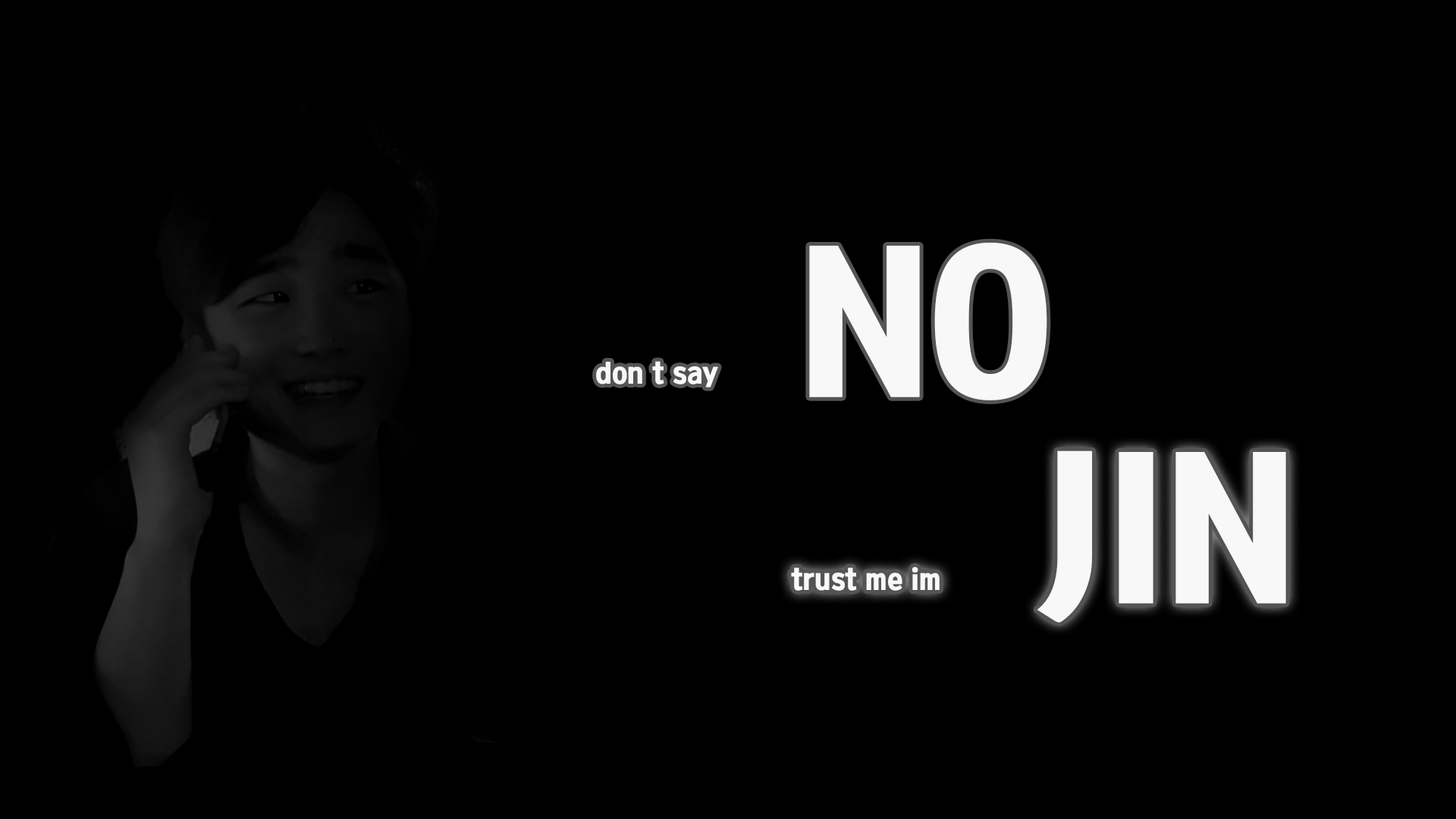
<style>
.page{position:relative;width:1456px;height:819px;background:#000000}
.page>*{position:absolute;margin:0}
.t1{font:27.3px "KoreanTITGD5-R";color:#f9f8f8}
.t2{font:189.6px "KoreanTITGD5-R";color:#f9f8f8}
</style>
<div class="page">
<p class="t1" style="left:596px;top:243px;width:451px;height:157px">don t say      <span class="t2">NO</span></p>
<p class="t1" style="left:791px;top:450px;width:495px;height:173px">trust me im      <span class="t2">JIN</span></p>
</div>
